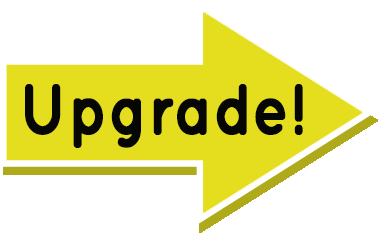
<style>
.page{position:relative;width:378px;height:233px;background:#ffffff}
.page>*{position:absolute;margin:0}
.t1{font:70.8px "Quicksand-Bold";color:#060605;font-weight:bold;scale:0.82 1}
</style>
<div class="page">
<p class="t1" style="left:25px;top:84px;width:278px;height:64px">Upgrade!</p>
</div>
